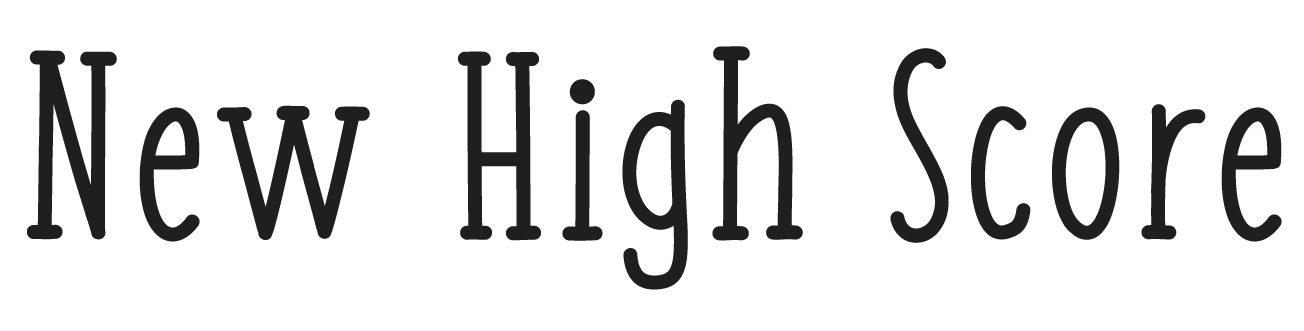
<style>
.page{position:relative;width:1304px;height:331px;background:#ffffff}
.page>*{position:absolute;margin:0}
.t1{font:250px "FISH&CHIPS-Regular";color:#201f1f;font-weight:bold}
</style>
<div class="page">
<p class="t1" style="left:27px;top:46px;width:1255px;height:244px">New High Score</p>
</div>
